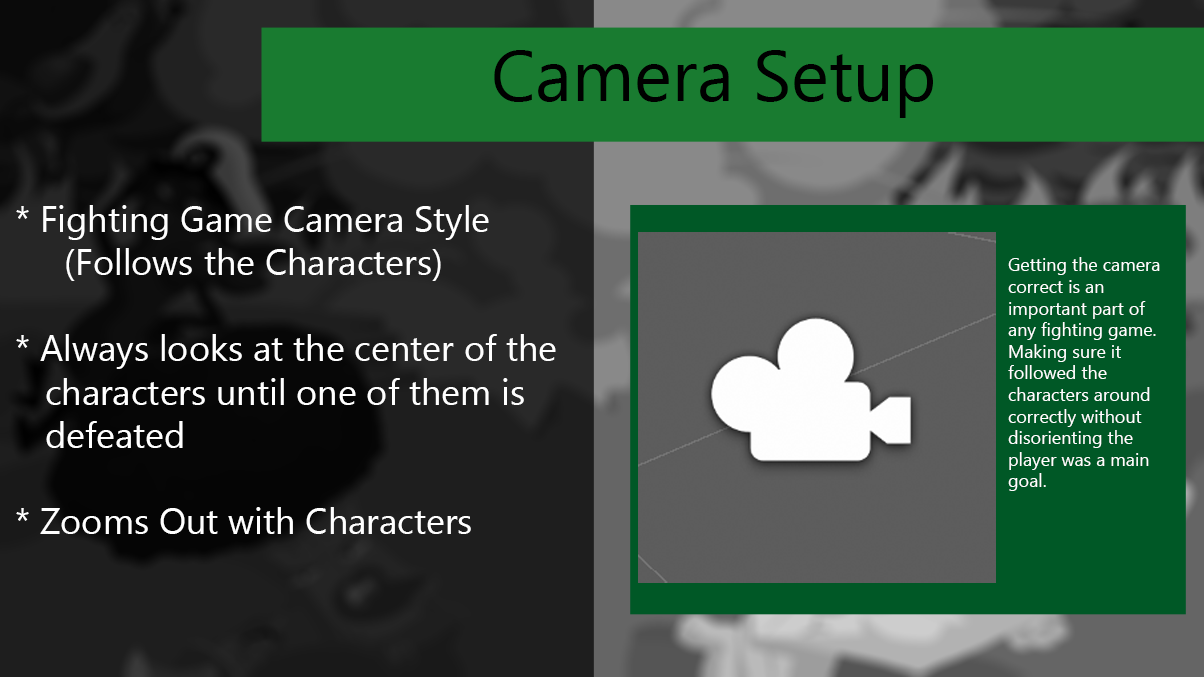
<style>
.page{position:relative;width:1204px;height:677px}
.page>*{position:absolute;margin:0}
.t1{font:72px "Gadugi";color:#000000}
.t2{font:36px "Gadugi";color:#ffffff}
.t3{font:18px "Gadugi";color:#ffffff}
</style>
<div class="page">
<p class="t1" style="left:494px;top:50px;width:439px;height:68px">Camera Setup</p>
<p class="t2" style="left:16px;top:205px;width:540px;height:329px">* Fighting Game Camera Style <br>     (Follows the Characters)<br><br>* Always looks at the center of the      <br>   characters until one of them is <br>   defeated <br><br>* Zooms Out with Characters</p>
<p class="t3" style="left:1008px;top:257px;width:152px;height:234px">Getting the camera correct is an <br>important part of any fighting game. Making sure it <br>followed the <br>characters around correctly without disorienting the player was a main goal.</p>
</div>
